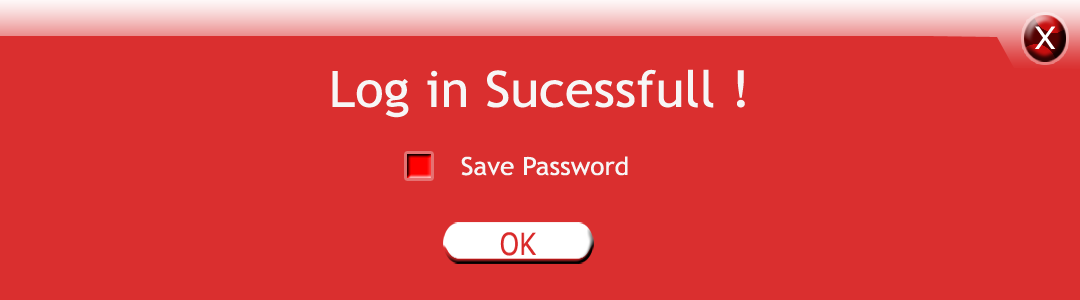
<style>
.page{position:relative;width:1080px;height:300px;background:#da2f2f}
.page>*{position:absolute;margin:0}
.t1{font:30.6px "Verdana";color:#ffffff;scale:1.05 1}
.t2{font:50px "TrebuchetMS";color:#f7f6f6;scale:1.05 1}
.t3{font:25px "TrebuchetMS";color:#f7f6f6;scale:1.05 1}
</style>
<div class="page">
<p class="t1" style="left:1035px;top:26px;width:21px;height:23px">X</p>
<p class="t2" style="left:332px;top:69px;width:413px;height:49px">Log in Sucessfull !</p>
<p class="t3" style="left:461px;top:156px;width:167px;height:20px">Save Password</p>
</div>
